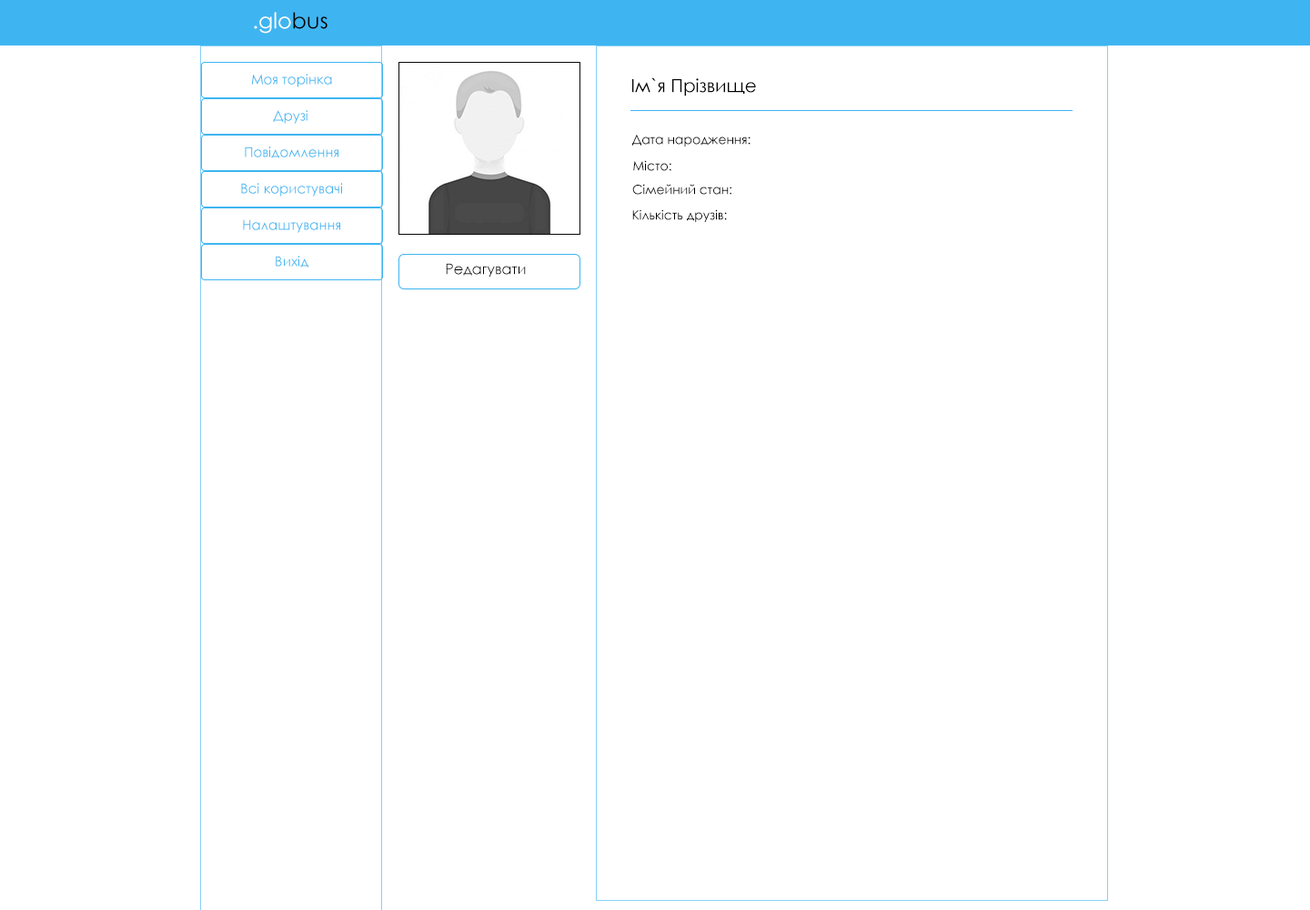
<style>
.page{position:relative;width:1310px;height:910px;background:#ffffff}
.page>*{position:absolute;margin:0}
.t1{font:21.8px "CenturyGothic";color:#ffffff}
.t2{font:21.8px "CenturyGothic";color:#000000}
.t3{font:13.6px "CenturyGothic";color:#3eb5f1}
.t4{font:18.2px "CenturyGothic";color:#000000}
.t5{font:12.7px "CenturyGothic";color:#000000}
.t6{font:14.6px "CenturyGothic";color:#000000}
</style>
<div class="page">
<p class="t1" style="left:254px;top:12px;width:74px;height:22px">.glo<span class="t2">bus</span></p>
<p class="t3" style="left:251px;top:74px;width:81px;height:13px">Моя торінка</p>
<p class="t4" style="left:632px;top:77px;width:124px;height:19px">Ім`я Прізвище</p>
<p class="t3" style="left:273px;top:110px;width:35px;height:14px">Друзі</p>
<p class="t5" style="left:632px;top:135px;width:119px;height:12px">Дата народження:</p>
<p class="t3" style="left:245px;top:147px;width:94px;height:11px">Повідомлення</p>
<p class="t5" style="left:633px;top:160px;width:39px;height:11px">Місто:</p>
<p class="t3" style="left:241px;top:183px;width:102px;height:14px">Всі користувачі</p>
<p class="t5" style="left:632px;top:184px;width:100px;height:11px">Сімейний стан:</p>
<p class="t5" style="left:632px;top:209px;width:95px;height:13px">Кількість друзів:</p>
<p class="t3" style="left:243px;top:219px;width:97px;height:14px">Налаштування</p>
<p class="t3" style="left:276px;top:256px;width:32px;height:12px">Вихід</p>
<p class="t6" style="left:446px;top:263px;width:80px;height:15px">Редагувати</p>
</div>
